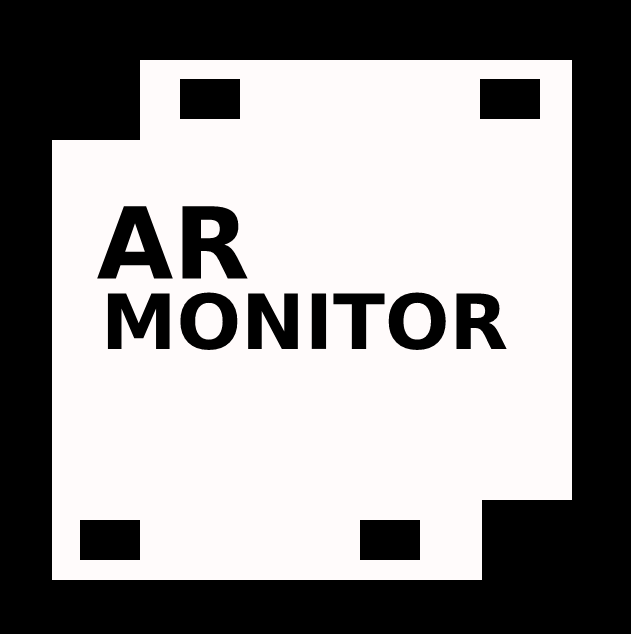
<style>
.page{position:relative;width:631px;height:634px;background:#fffbfb}
.page>*{position:absolute;margin:0}
.t1{font:99px "DejaVuSans-Bold";color:#000000}
.t2{font:76px "DejaVuSans-Bold";color:#000000}
</style>
<div class="page">
<p class="t1" style="left:97px;top:206px;width:151px;height:73px">AR</p>
<p class="t2" style="left:107px;top:292px;width:400px;height:58px">MONITOR</p>
</div>
